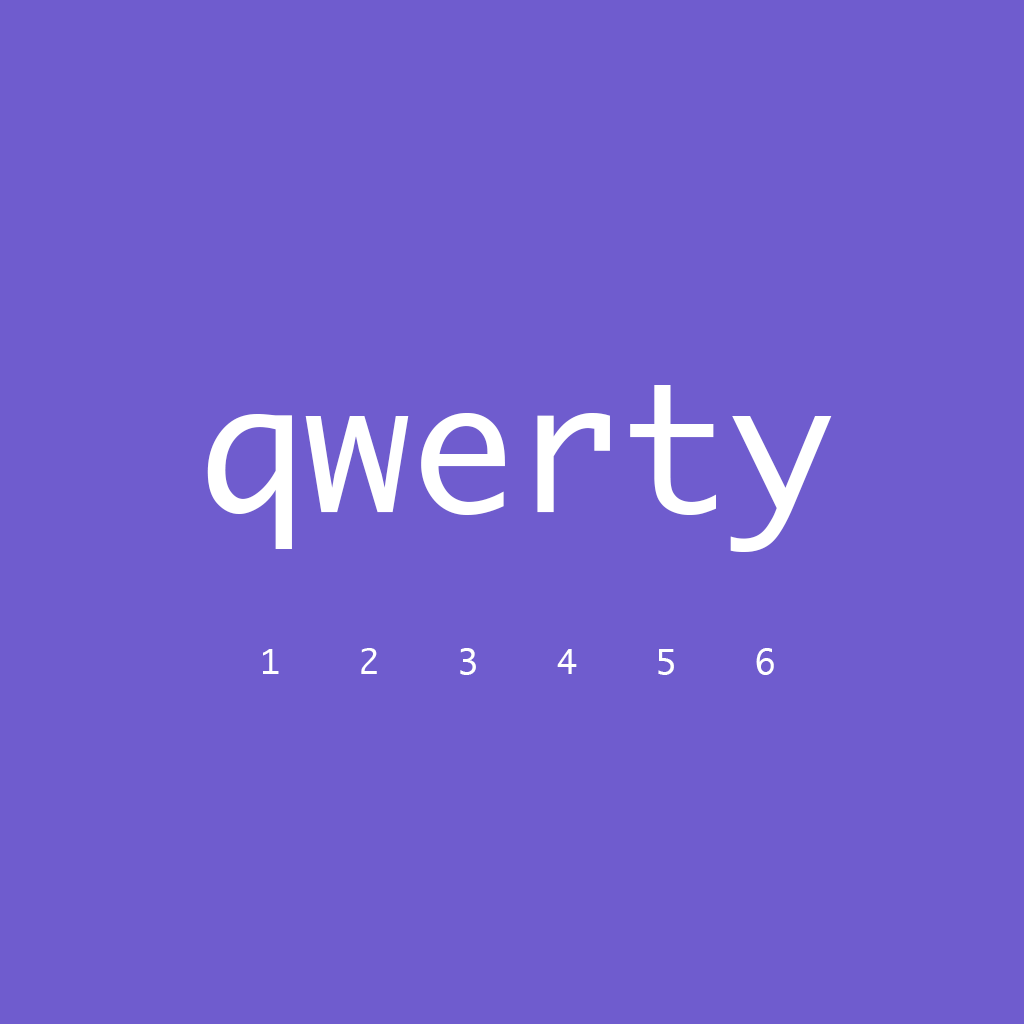
<style>
.page{position:relative;width:1024px;height:1024px;background:#6f5cce}
.page>*{position:absolute;margin:0}
.t1{font:176.7px "Ayuthaya";color:#ffffff}
.t2{font:33.3px "Ayuthaya";color:#ffffff}
</style>
<div class="page">
<p class="t1" style="left:207px;top:385px;width:625px;height:167px">qwerty</p>
<p class="t2" style="left:263px;top:648px;width:511px;height:27px">1    2    3    4    5    6</p>
</div>
